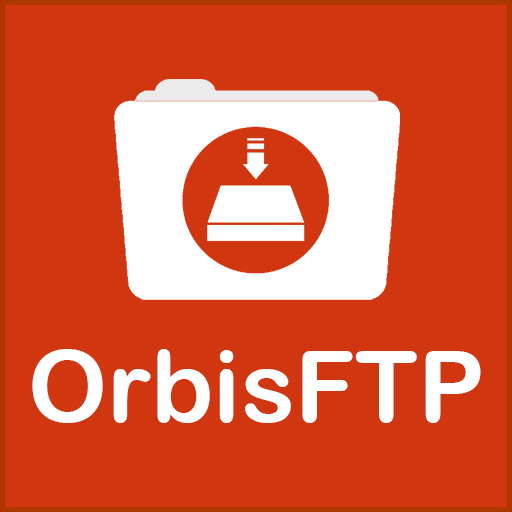
<style>
.page{position:relative;width:512px;height:512px;background:#d03610}
.page>*{position:absolute;margin:0}
.t1{font:100px "ArialRoundedMTBold";color:#ffffff}
</style>
<div class="page">
<p class="t1" style="left:32px;top:349px;width:449px;height:74px">OrbisFTP</p>
</div>
